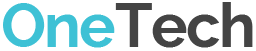
<style>
.page{position:relative;width:256px;height:51px;background:#ffffff}
.page>*{position:absolute;margin:0}
.t1{font:60.9px "Raleway-Bold";letter-spacing:-0.02em;color:#444444}
.t2{font:60.9px "Raleway-Bold";letter-spacing:-0.02em;color:#3ec1d5}
</style>
<div class="page">
<p class="t1" style="left:3px;top:2px;width:250px;height:46px"><span class="t2">One</span>Tech</p>
</div>
